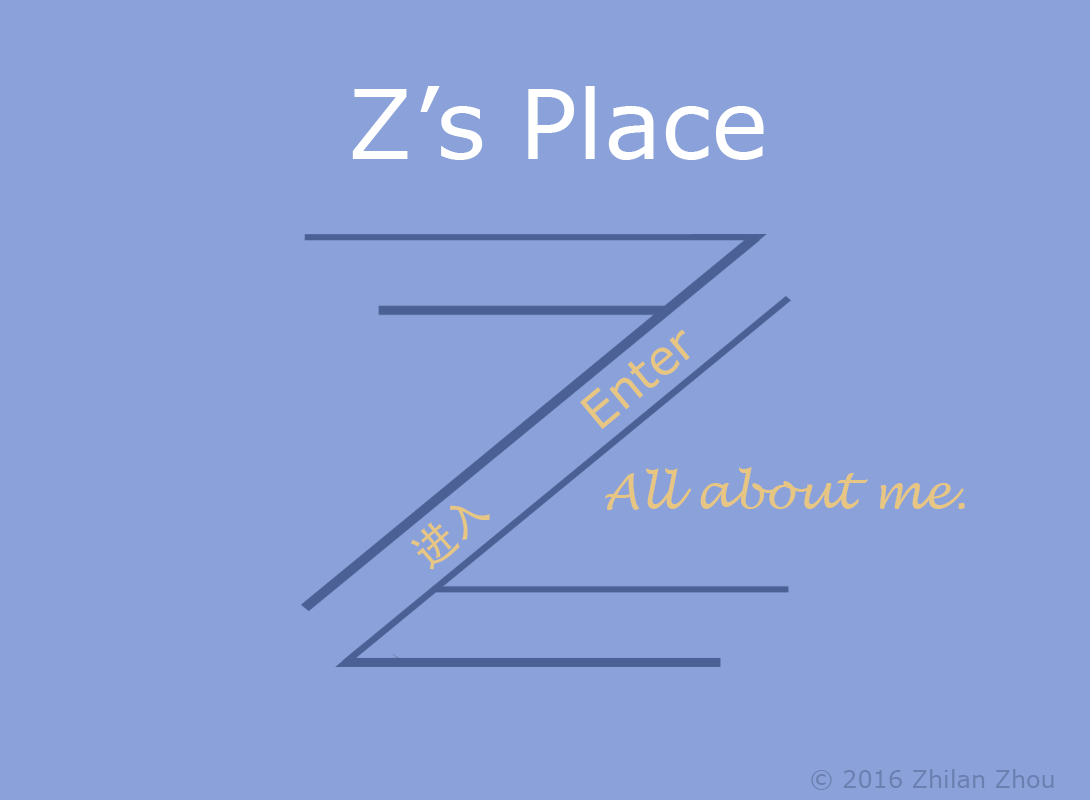
<style>
.page{position:relative;width:1090px;height:800px;background:#8aa2d9}
.page>*{position:absolute;margin:0}
.t1{font:96px "Verdana";color:#ffffff}
.t2{font:48px "Verdana";color:#e7c683}
.t3{font:48px "LucidaHandwriting-Italic";color:#e7c683}
.t4{font:42.7px "AdobeHeitiStd-Regular";color:#e7c683}
.t5{font:24px "Verdana";color:#6b80b0}
</style>
<div class="page">
<p class="t1" style="left:352px;top:86px;width:412px;height:74px">Z’s Place</p>
<p class="t2" style="left:580px;top:329px;width:110px;height:100px;rotate:-40deg">Enter</p>
<p class="t3" style="left:604px;top:467px;width:361px;height:43px">All about me.</p>
<p class="t4" style="left:410px;top:505px;width:80px;height:65px;rotate:-41deg">进入</p>
<p class="t5" style="left:811px;top:769px;width:243px;height:21px">© 2016 Zhilan Zhou</p>
</div>
